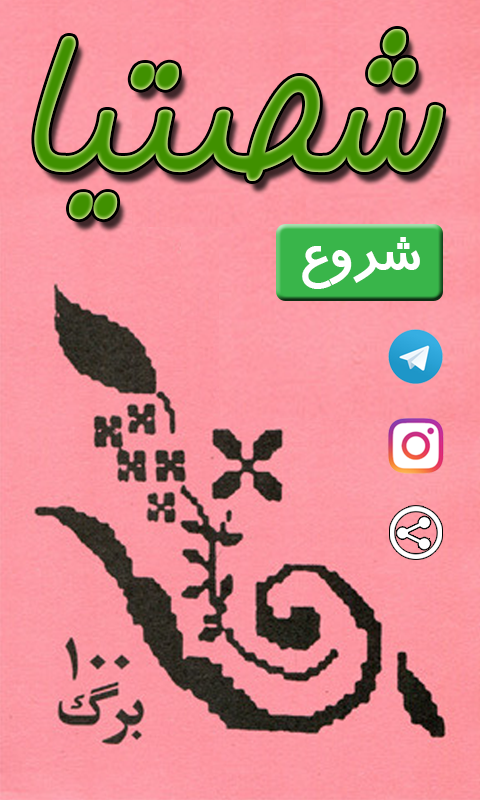
<style>
.page{position:relative;width:480px;height:800px}
.page>*{position:absolute;margin:0}
.t1{font:286.1px "BKamranBold";color:#409000}
.t2{font:52.8px "BTrafficBold";color:#ffffff}
</style>
<div class="page">
<p class="t1" style="left:34px;top:29px;width:410px;height:191px">شصتیا</p>
<p class="t2" style="left:302px;top:237px;width:118px;height:52px">شروع</p>
</div>
